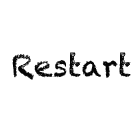
<style>
.page{position:relative;width:140px;height:140px;background:#ffffff}
.page>*{position:absolute;margin:0}
.t1{font:30px "Chalkduster";color:#050505}
</style>
<div class="page">
<p class="t1" style="left:12px;top:52px;width:119px;height:28px">Restart</p>
</div>
